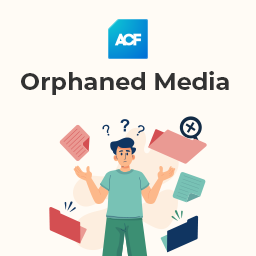
<style>
.page{position:relative;width:256px;height:256px;background:#fffbf5}
.page>*{position:absolute;margin:0}
.t1{font:24px "Montserrat-Bold";color:#323232}
</style>
<div class="page">
<p class="t1" style="left:21px;top:71px;width:208px;height:24px">Orphaned Media</p>
</div>
